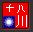
<style>
.page{position:relative;width:33px;height:32px;background:#f20000}
.page>*{position:absolute;margin:0}
.t1{font:10.4px "SimSun";color:#ffffff}
.t2{font:11.7px "SimSun";color:#ffffff}
</style>
<div class="page">
<p class="t1" style="left:6px;top:4px;width:19px;height:9px">十八</p>
<p class="t2" style="left:16px;top:15px;width:11px;height:12px">川</p>
</div>
